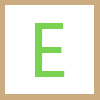
<style>
.page{position:relative;width:100px;height:100px;background:#ffffff}
.page>*{position:absolute;margin:0}
.t1{font:72px "MicrosoftYaHei";color:#78d350}
</style>
<div class="page">
<p class="t1" style="left:35px;top:23px;width:30px;height:54px">E</p>
</div>
